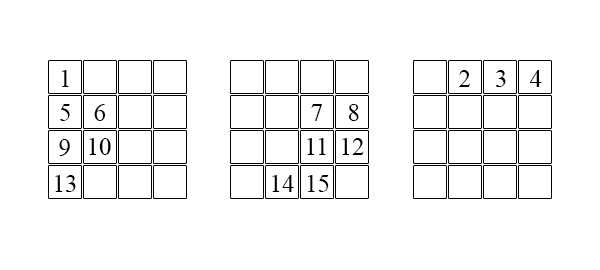
<style>
.page{position:relative;width:600px;height:270px;background:#ffffff}
.page>*{position:absolute;margin:0}
.t1{font:25px "TimesNewRomanPSMT";color:#000000}
</style>
<div class="page">
<p class="t1" style="left:62px;top:70px;width:7px;height:17px">1</p>
<p class="t1" style="left:459px;top:70px;width:11px;height:17px">2</p>
<p class="t1" style="left:496px;top:70px;width:10px;height:17px">3</p>
<p class="t1" style="left:529px;top:70px;width:13px;height:17px">4</p>
<p class="t1" style="left:60px;top:104px;width:10px;height:17px">5</p>
<p class="t1" style="left:94px;top:104px;width:12px;height:17px">6</p>
<p class="t1" style="left:311px;top:104px;width:11px;height:17px">7</p>
<p class="t1" style="left:348px;top:104px;width:11px;height:17px">8</p>
<p class="t1" style="left:59px;top:139px;width:11px;height:17px">9</p>
<p class="t1" style="left:89px;top:138px;width:22px;height:17px">10</p>
<p class="t1" style="left:307px;top:138px;width:19px;height:17px">11</p>
<p class="t1" style="left:342px;top:138px;width:22px;height:17px">12</p>
<p class="t1" style="left:55px;top:175px;width:21px;height:17px">13</p>
<p class="t1" style="left:272px;top:175px;width:22px;height:17px">14</p>
<p class="t1" style="left:308px;top:175px;width:21px;height:17px">15</p>
</div>
